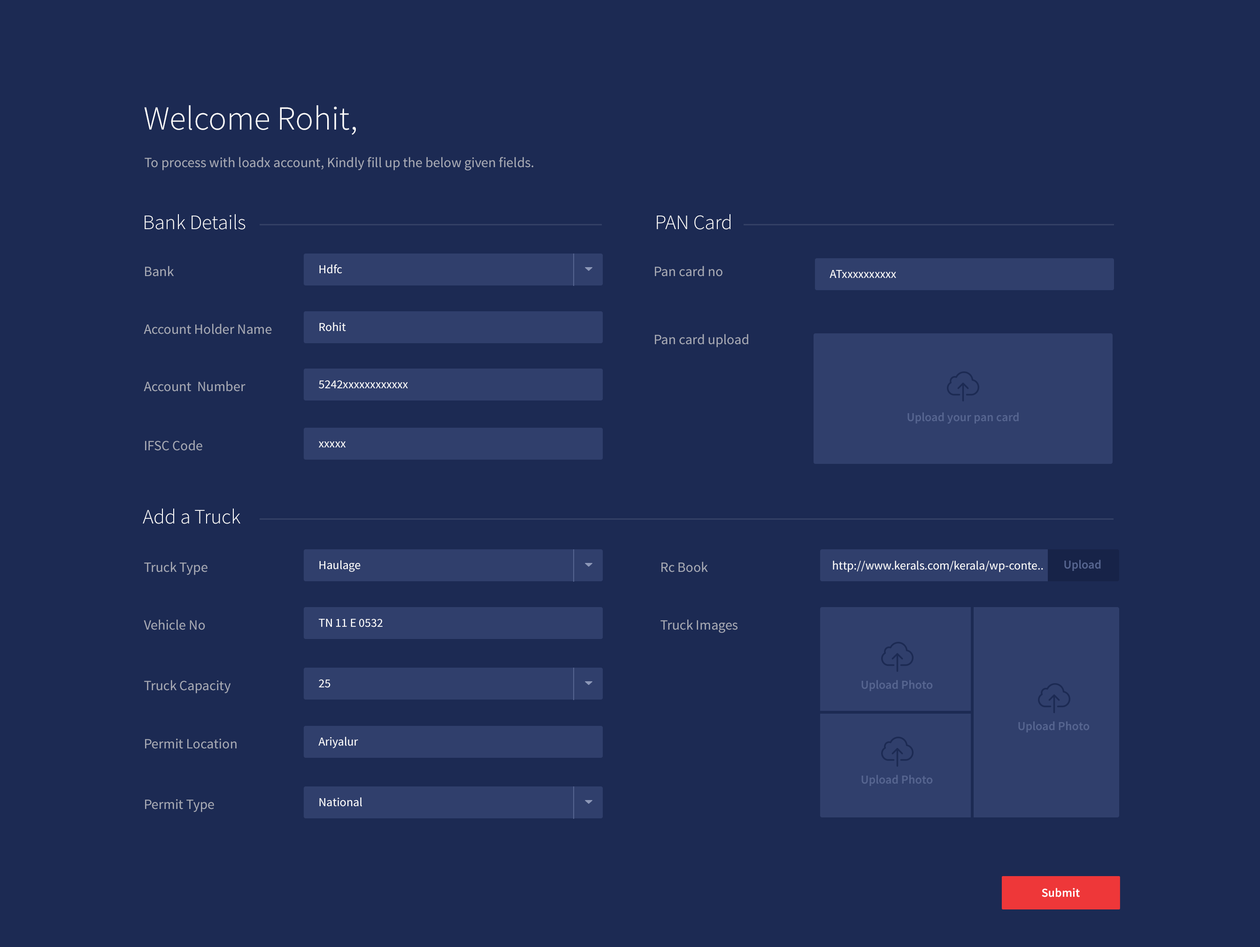
<style>
.page{position:relative;width:1260px;height:947px;background:#1c2a53}
.page>*{position:absolute;margin:0}
.t1{font:33.8px "SourceSansPro-Light";color:#fefefe}
.t2{font:14.1px "SourceSansPro-Regular";color:#a8abb6}
.t3{font:20.7px "SourceSansPro-Light";color:#fefefe}
.t4{font:12.2px "SourceSansPro-Regular";color:#ffffff}
.t5{font:12.2px "SourceSansPro-Semibold";color:#566590}
.t6{font:12.2px "SourceSansPro-Semibold";color:#ffffff}
</style>
<div class="page">
<p class="t1" style="left:144px;top:105px;width:212px;height:30px">Welcome Rohit,</p>
<p class="t2" style="left:145px;top:157px;width:388px;height:13px">To process with loadx account, Kindly fill up the below given fields.</p>
<p class="t3" style="left:145px;top:214px;width:100px;height:15px">Bank Details</p>
<p class="t3" style="left:657px;top:214px;width:73px;height:15px">PAN Card</p>
<p class="t2" style="left:145px;top:266px;width:29px;height:10px">Bank</p>
<p class="t4" style="left:319px;top:264px;width:23px;height:10px">Hdfc</p>
<p class="t2" style="left:655px;top:266px;width:67px;height:10px">Pan card no</p>
<p class="t4" style="left:829px;top:270px;width:67px;height:8px">ATxxxxxxxxxx</p>
<p class="t2" style="left:144px;top:323px;width:128px;height:11px">Account Holder Name</p>
<p class="t4" style="left:319px;top:322px;width:27px;height:9px">Rohit</p>
<p class="t2" style="left:655px;top:334px;width:93px;height:13px">Pan card upload</p>
<p class="t2" style="left:144px;top:381px;width:101px;height:10px">Account  Number</p>
<p class="t4" style="left:319px;top:380px;width:89px;height:9px">5242xxxxxxxxxxxx</p>
<p class="t5" style="left:907px;top:412px;width:111px;height:12px">Upload your pan card</p>
<p class="t2" style="left:145px;top:440px;width:57px;height:11px">IFSC Code</p>
<p class="t4" style="left:319px;top:441px;width:27px;height:6px">xxxxx</p>
<p class="t3" style="left:143px;top:508px;width:97px;height:16px">Add a Truck</p>
<p class="t2" style="left:144px;top:561px;width:63px;height:14px">Truck Type</p>
<p class="t4" style="left:319px;top:560px;width:41px;height:12px">Haulage</p>
<p class="t2" style="left:661px;top:561px;width:47px;height:11px">Rc Book</p>
<p class="t4" style="left:833px;top:560px;width:210px;height:12px">http://www.kerals.com/kerala/wp-conte..</p>
<p class="t5" style="left:1064px;top:559px;width:37px;height:12px">Upload</p>
<p class="t2" style="left:144px;top:619px;width:61px;height:11px">Vehicle No</p>
<p class="t4" style="left:319px;top:619px;width:63px;height:8px">TN 11 E 0532</p>
<p class="t2" style="left:660px;top:619px;width:77px;height:14px">Truck Images</p>
<p class="t2" style="left:144px;top:680px;width:87px;height:13px">Truck Capacity</p>
<p class="t4" style="left:319px;top:679px;width:11px;height:9px">25</p>
<p class="t5" style="left:861px;top:680px;width:72px;height:11px">Upload Photo</p>
<p class="t5" style="left:1018px;top:721px;width:71px;height:11px">Upload Photo</p>
<p class="t4" style="left:318px;top:736px;width:40px;height:12px">Ariyalur</p>
<p class="t2" style="left:145px;top:738px;width:92px;height:11px">Permit Location</p>
<p class="t5" style="left:861px;top:774px;width:72px;height:12px">Upload Photo</p>
<p class="t4" style="left:319px;top:797px;width:43px;height:9px">National</p>
<p class="t2" style="left:145px;top:799px;width:69px;height:13px">Permit Type</p>
<p class="t6" style="left:1041px;top:887px;width:38px;height:10px">Submit</p>
</div>
